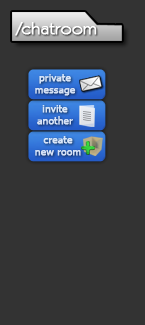
<style>
.page{position:relative;width:145px;height:325px;background:#333333}
.page>*{position:absolute;margin:0}
.t1{font:16.9px "KabelITCbyBT-Book";color:#ffffff;font-weight:bold;scale:1.09 1}
.t2{font:10px/12px "Tahoma";color:#d5e1f6;font-weight:bold}
</style>
<div class="page">
<p class="t1" style="left:15px;top:22px;width:82px;height:14px">/chatroom</p>
<p class="t2" style="left:35px;top:74px;width:41px;height:22px;text-align:center">private<br>message</p>
<p class="t2" style="left:37px;top:105px;width:36px;height:20px;text-align:center">invite<br>another</p>
<p class="t2" style="left:35px;top:136px;width:46px;height:20px;text-align:center">create<br>new room</p>
</div>
